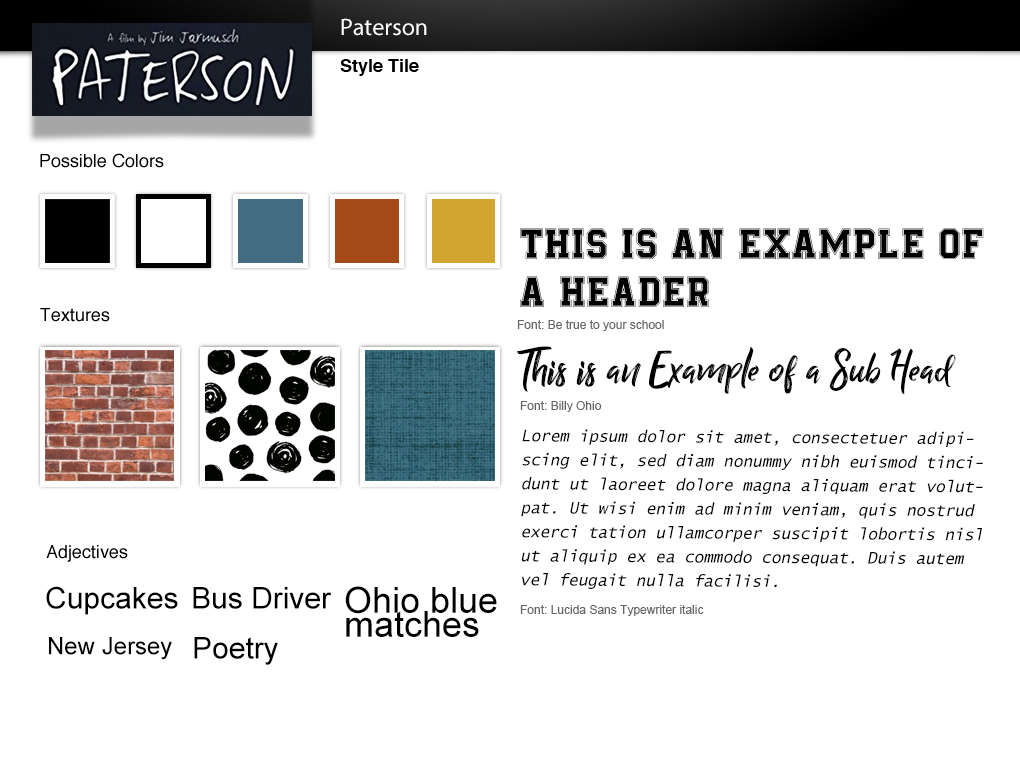
<style>
.page{position:relative;width:1020px;height:760px;background:#ffffff}
.page>*{position:absolute;margin:0}
.t1{font:24px "MyriadPro-Regular";color:#ffffff}
.t2{font:18px "Helvetica-Bold";color:#000000}
.t3{font:18px "Helvetica";color:#000000}
.t4{font:48px/24px "BeTrueToYourSchool-Regular";color:#000000}
.t5{font:12px "ArialMT";color:#666666}
.t6{font:48px "BillyOhio";color:#000000}
.t7{font:16px/24px "LucidaSans-TypewriterOblique";color:#000000}
.t8{font:30px "ArialMT";color:#000000}
.t9{font:36px "ArialMT";color:#000000}
.t10{font:24px "ArialMT";color:#000000}
</style>
<div class="page">
<p class="t1" style="left:341px;top:18px;width:86px;height:18px">Paterson</p>
<p class="t2" style="left:340px;top:59px;width:79px;height:17px">Style Tile</p>
<p class="t3" style="left:40px;top:153px;width:124px;height:15px">Possible Colors</p>
<p class="t4" style="left:520px;top:228px;width:464px;height:79px">This is an Example of <br><br>a Header</p>
<p class="t3" style="left:40px;top:308px;width:70px;height:14px">Textures</p>
<p class="t5" style="left:517px;top:320px;width:147px;height:11px">Font: Be true to your school</p>
<p class="t6" style="left:517px;top:346px;width:439px;height:49px">This is an Example of a Sub Head</p>
<p class="t5" style="left:520px;top:401px;width:82px;height:11px">Font: Billy Ohio</p>
<p class="t7" style="left:521px;top:429px;width:462px;height:160px">Lorem ipsum dolor sit amet, consectetuer adipiscing elit, sed diam nonummy nibh euismod tincidunt ut laoreet dolore magna aliquam erat volutpat. Ut wisi enim ad minim veniam, quis nostrud exerci tation ullamcorper suscipit lobortis nisl ut aliquip ex ea commodo consequat. Duis autem vel feugait nulla facilisi.</p>
<p class="t3" style="left:46px;top:545px;width:82px;height:17px">Adjectives</p>
<p class="t8" style="left:46px;top:586px;width:132px;height:29px">Cupcakes</p>
<p class="t8" style="left:193px;top:587px;width:139px;height:22px">Bus Driver</p>
<p class="t9" style="left:345px;top:586px;width:152px;height:51px">Ohio blue matches</p>
<p class="t5" style="left:520px;top:605px;width:184px;height:11px">Font: Lucida Sans Typewriter italic</p>
<p class="t10" style="left:49px;top:637px;width:123px;height:23px">New Jersey</p>
<p class="t8" style="left:194px;top:637px;width:84px;height:28px">Poetry</p>
</div>
